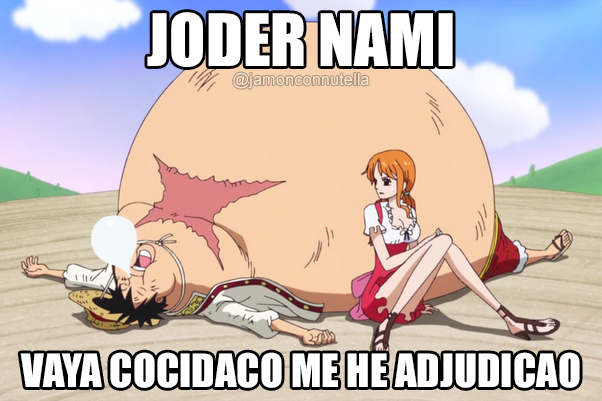
<style>
.page{position:relative;width:602px;height:401px}
.page>*{position:absolute;margin:0}
.t1{font:66.7px "Impact";color:#ffffff}
.t2{font:16.5px "ArialMT";color:#fbe5d2}
.t3{font:42.4px "Impact";color:#ffffff}
</style>
<div class="page">
<p class="t1" style="left:147px;top:12px;width:306px;height:55px">JODER NAMI</p>
<p class="t2" style="left:233px;top:72px;width:136px;height:17px">@jamonconnutella</p>
<p class="t3" style="left:20px;top:352px;width:560px;height:36px">VAYA COCIDACO ME HE ADJUDICAO</p>
</div>
